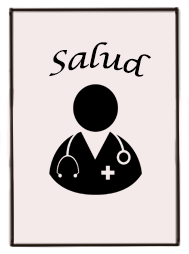
<style>
.page{position:relative;width:189px;height:254px;background:#f5eaea}
.page>*{position:absolute;margin:0}
.t1{font:30px "LucidaCalligraphy-Italic";color:#000000}
</style>
<div class="page">
<p class="t1" style="left:49px;top:42px;width:102px;height:35px">Salud</p>
</div>
